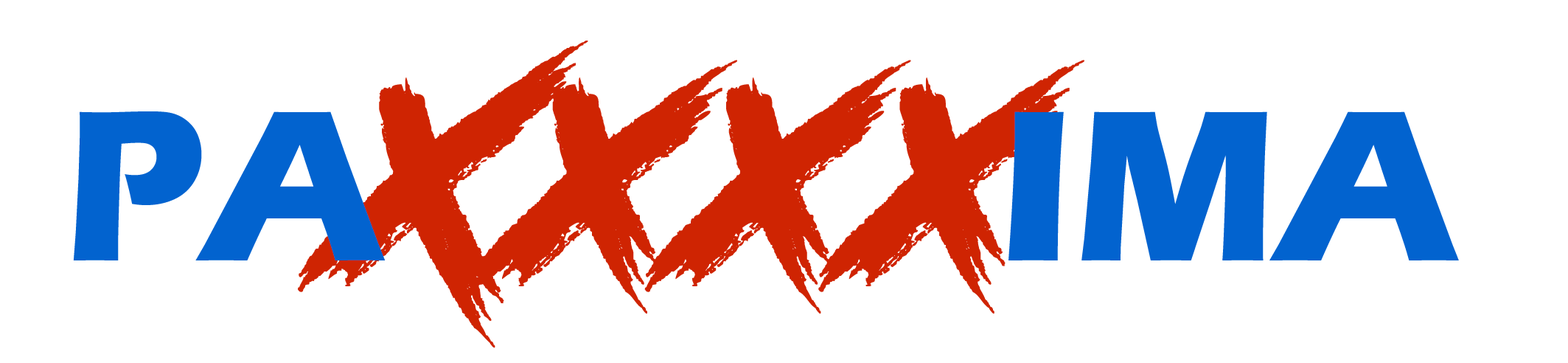
<style>
.page{position:relative;width:1568px;height:363px;background:#ffffff}
.page>*{position:absolute;margin:0}
.t1{font:289.6px "RoadRage";color:#cf2402}
.t2{font:222.5px "ErasITC-Bold";color:#0263cf}
</style>
<div class="page">
<p class="t1" style="left:298px;top:41px;width:786px;height:307px">Xxxx</p>
<p class="t2" style="left:73px;top:111px;width:1386px;height:149px">PA           IMA</p>
</div>
